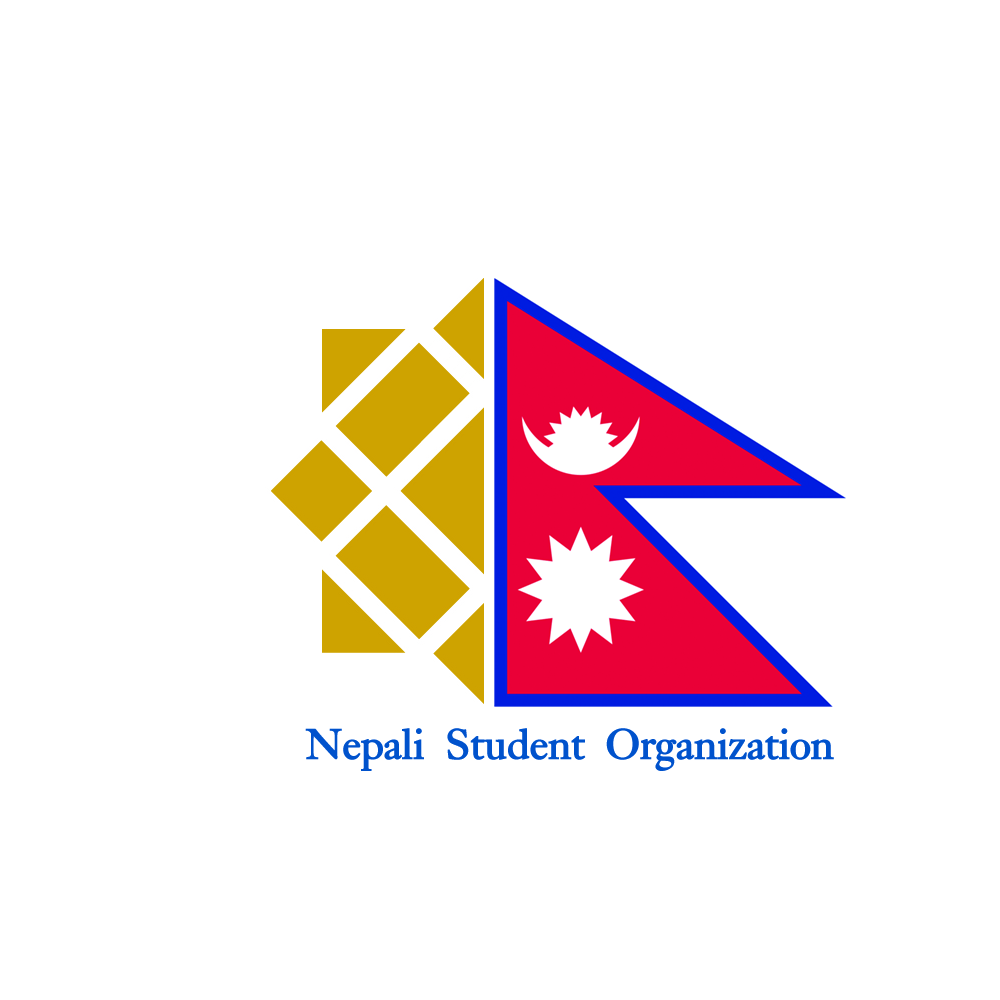
<style>
.page{position:relative;width:1000px;height:1000px;background:#ffffff}
.page>*{position:absolute;margin:0}
.t1{font:41.8px "Bliss-Bold";color:#0052cc}
</style>
<div class="page">
<p class="t1" style="left:305px;top:728px;width:529px;height:43px">Nepali Student Organization</p>
</div>
